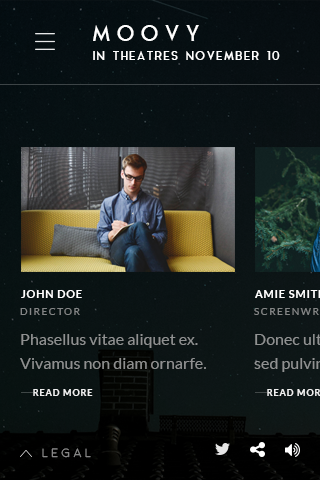
<style>
.page{position:relative;width:320px;height:480px}
.page>*{position:absolute;margin:0}
.t1{font:22px "AquaGrotesque";letter-spacing:0.2em;color:#ffffff;text-transform:uppercase}
.t2{font:12px "AquaGrotesque";letter-spacing:0.05em;color:#ffffff;text-transform:uppercase}
.t3{font:11px "Lato-Bold";letter-spacing:0.07em;color:#ffffff;text-transform:uppercase}
.t4{font:10px "Lato-Regular";letter-spacing:0.15em;color:#838585;text-transform:uppercase}
.t5{font:16px/24px "Lato-Regular";color:#8f9191}
.t6{font:9px "Lato-Bold";letter-spacing:0.1em;color:#ffffff;text-transform:uppercase}
.t7{font:12px "Moon-Light";letter-spacing:0.3em;text-transform:uppercase}
</style>
<div class="page">
<p class="t1" style="left:93px;top:25px;width:106px;height:16px">moovy</p>
<p class="t2" style="left:93px;top:51px;width:187px;height:9px">IN THEATRES NoveMBER 10</p>
<p class="t3" style="left:21px;top:290px;width:61px;height:8px">John Doe</p>
<p class="t4" style="left:20px;top:308px;width:60px;height:7px">director</p>
<p class="t5" style="left:20px;top:334px;width:186px;height:35px">Phasellus vitae aliquet ex. Vivamus non diam ornarfe.</p>
<p class="t6" style="left:33px;top:389px;width:60px;height:7px;opacity:0.9">read more</p>
<p class="t7" style="left:42px;top:448px;width:49px;height:10px">legal</p>
</div>
